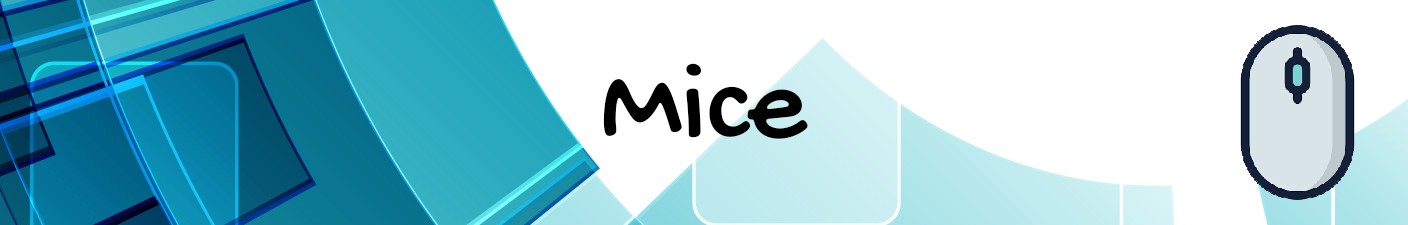
<style>
.page{position:relative;width:1408px;height:225px;background:#ffffff}
.page>*{position:absolute;margin:0}
.t1{font:116.7px "GochiHand-Regular";color:#000000}
</style>
<div class="page">
<p class="t1" style="left:603px;top:63px;width:205px;height:76px">Mice</p>
</div>
